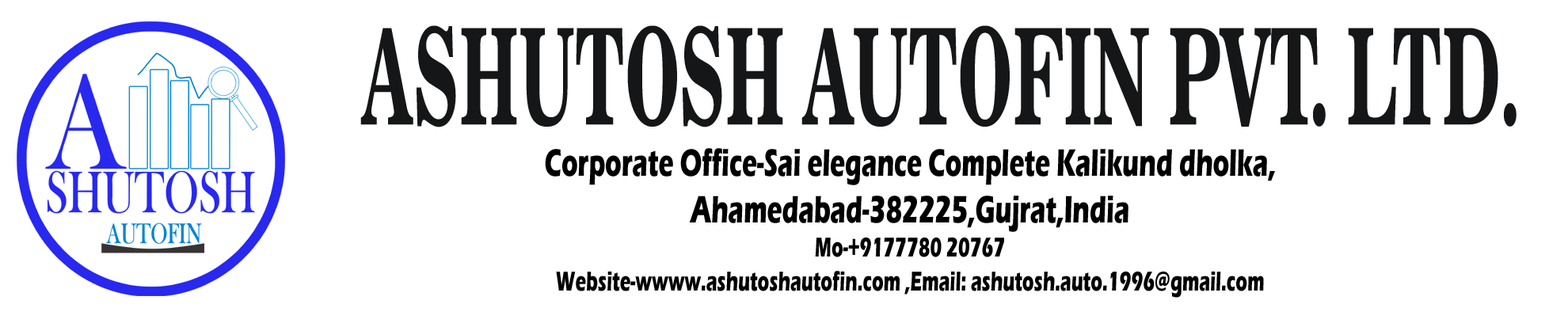
<style>
.page{position:relative;width:1568px;height:323px;background:#ffffff}
.page>*{position:absolute;margin:0}
.t1{font:132.1px "News706BT-BoldC";color:#151617;scale:0.53 1}
.t2{font:39.4px "ErasITC-Bold";color:#000000;scale:0.64 1}
.t3{font:28.1px "ErasITC-Bold";color:#000000;scale:0.64 1}
</style>
<div class="page">
<p class="t1" style="left:360px;top:25px;width:1157px;height:102px">ASHUTOSH AUTOFIN PVT. LTD.</p>
<p class="t2" style="left:545px;top:148px;width:730px;height:150px;text-align:center">Corporate Office-Sai elegance Complete Kalikund dholka, <br>Ahamedabad-382225,Gujrat,India<br><span class="t3">Mo-+9177780 20767<br>Website-wwww.ashutoshautofin.com ,Email: ashutosh.auto.1996@gmail.com</span></p>
</div>
